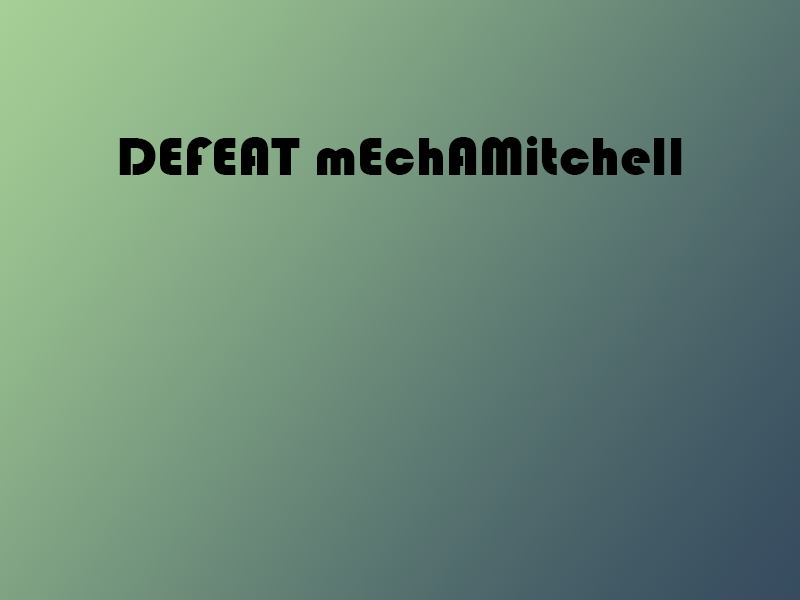
<style>
.page{position:relative;width:800px;height:600px}
.page>*{position:absolute;margin:0}
.t1{font:56px "Bauhaus93";color:#000000}
</style>
<div class="page">
<p class="t1" style="left:119px;top:136px;width:563px;height:40px">DEFEAT mEchAMitchell</p>
</div>
